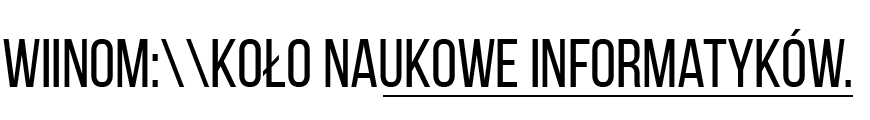
<style>
.page{position:relative;width:870px;height:120px;background:#ffffff}
.page>*{position:absolute;margin:0}
.t1{font:66.7px "BebasNeueRegular";color:#000000}
</style>
<div class="page">
<p class="t1" style="left:3px;top:29px;width:848px;height:58px">WIiNoM:\\Koło Naukowe Informatyków.</p>
</div>
